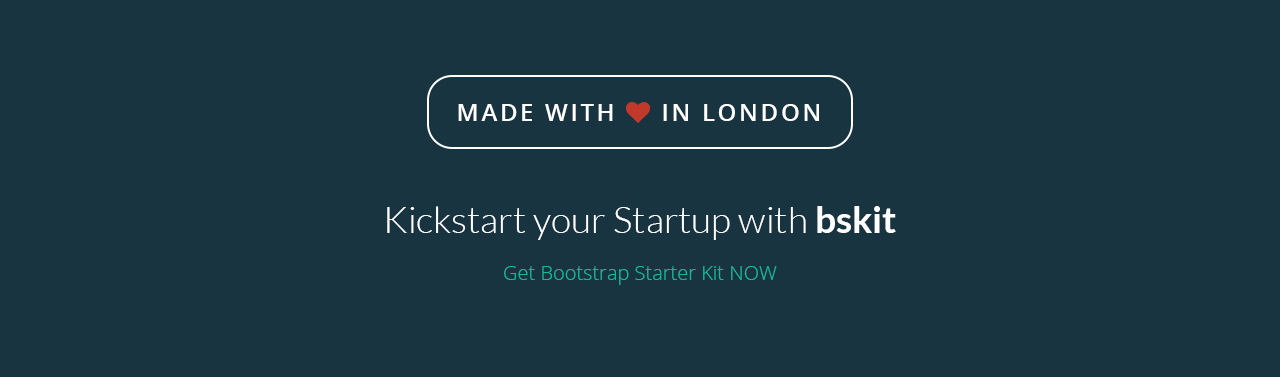
<style>
.page{position:relative;width:1280px;height:377px;background:#193441}
.page>*{position:absolute;margin:0}
.t1{font:37px "Lato-Light";color:#ffffff}
.t2{font:37px "Lato-Bold";color:#ffffff}
.t3{font:20px "OpenSans-Light";color:#19b799}
</style>
<div class="page">
<p class="t1" style="left:387px;top:206px;width:509px;height:34px">Kickstart your Startup with <span class="t2">bskit</span></p>
<p class="t3" style="left:504px;top:266px;width:273px;height:19px">Get Bootstrap Starter Kit NOW</p>
</div>
